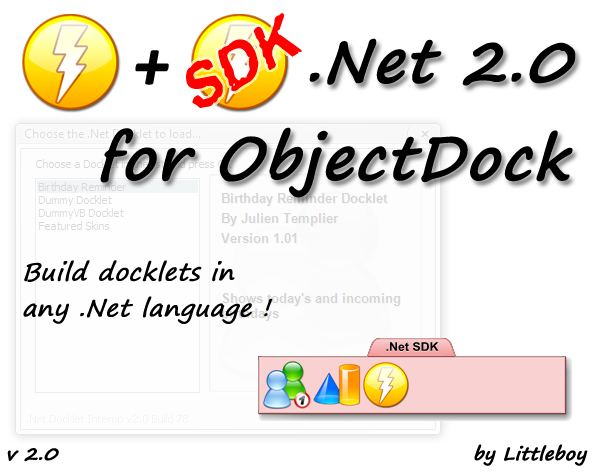
<style>
.page{position:relative;width:600px;height:474px;background:#ffffff}
.page>*{position:absolute;margin:0}
.t1{font:60px "Stamped!";color:#ff0000;font-weight:bold;font-style:italic}
.t2{font:60px "SegoePrint-Bold";color:#000000;font-weight:bold;font-style:italic}
.t3{font:72px "Calibri-Bold";color:#000000;font-weight:bold;font-style:italic}
.t4{font:24px/36px "SegoePrint";color:#000000;font-weight:bold;font-style:italic}
.t5{font:18px "SegoePrint-Bold";color:#000000;font-weight:bold;font-style:italic}
</style>
<div class="page">
<p class="t1" style="left:186px;top:13px;width:116px;height:95px;rotate:-31deg">SDK</p>
<p class="t2" style="left:309px;top:38px;width:267px;height:48px">.Net 2.0</p>
<p class="t3" style="left:135px;top:50px;width:34px;height:35px">+</p>
<p class="t2" style="left:100px;top:127px;width:473px;height:71px">for ObjectDock</p>
<p class="t4" style="left:23px;top:260px;width:250px;height:64px">Build docklets in <br>any .Net language !</p>
<p class="t5" style="left:7px;top:448px;width:52px;height:14px">v 2.0</p>
<p class="t5" style="left:474px;top:444px;width:114px;height:22px">by Littleboy</p>
</div>
